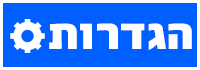
<style>
.page{position:relative;width:200px;height:70px;background:#0060ff}
.page>*{position:absolute;margin:0}
.t1{font:52.7px "FbAlbatros-Black";color:#ffffff}
</style>
<div class="page">
<p class="t1" style="left:49px;top:23px;width:143px;height:27px">הגדרות</p>
</div>
